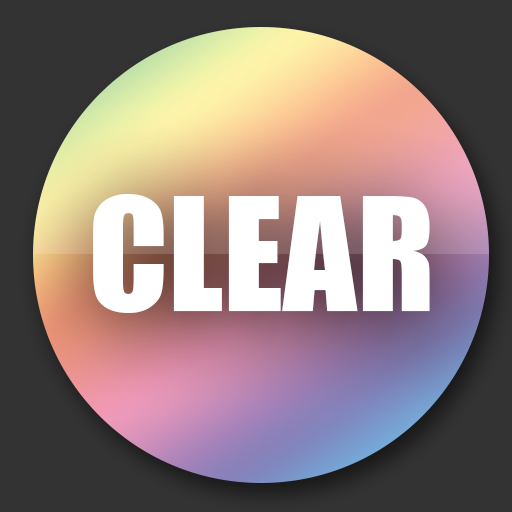
<style>
.page{position:relative;width:512px;height:512px;background:#333333}
.page>*{position:absolute;margin:0}
.t1{font:145px "Impact";color:#ffffff}
</style>
<div class="page">
<p class="t1" style="left:93px;top:194px;width:337px;height:119px">CLEAR</p>
</div>
